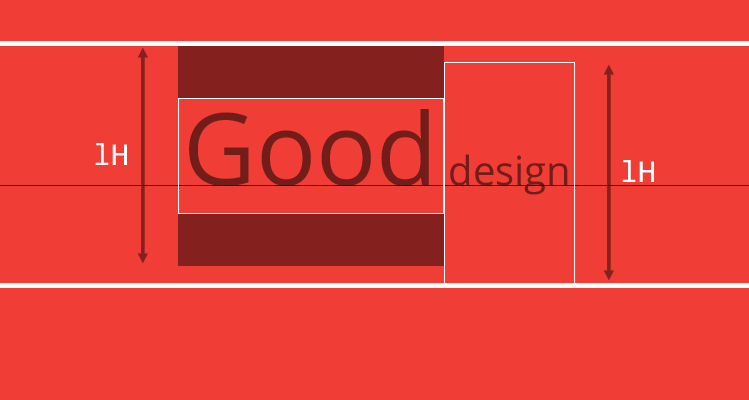
<style>
.page{position:relative;width:749px;height:400px;background:#f03d36}
.page>*{position:absolute;margin:0}
.t1{font:40px "OpenSans";color:#711d19}
.t2{font:100px "OpenSans";color:#711d19}
.t3{font:32px "Consolas";color:#ffffff}
</style>
<div class="page">
<p class="t1" style="left:189px;top:109px;width:379px;height:86px"><span class="t2">Good</span> design</p>
<p class="t1" style="left:189px;top:109px;width:379px;height:86px"><span class="t2">Good</span> design</p>
<p class="t3" style="left:95px;top:143px;width:32px;height:22px">lH</p>
<p class="t3" style="left:95px;top:143px;width:32px;height:22px">lH</p>
<p class="t3" style="left:622px;top:160px;width:32px;height:22px">lH</p>
<p class="t3" style="left:622px;top:160px;width:32px;height:22px">lH</p>
</div>
